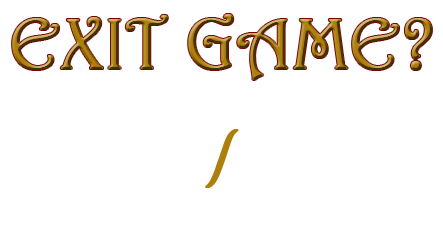
<style>
.page{position:relative;width:443px;height:227px;background:#ffffff}
.page>*{position:absolute;margin:0}
.t1{font:72px "Harrington";font-weight:bold}
.t2{font:72px "Harrington";color:#ac800b;font-weight:bold}
</style>
<div class="page">
<p class="t1" style="left:12px;top:14px;width:420px;height:66px">EXIT GAME?</p>
<p class="t2" style="left:205px;top:129px;width:34px;height:59px">/</p>
</div>
